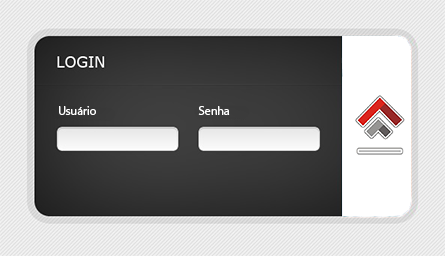
<style>
.page{position:relative;width:445px;height:256px}
.page>*{position:absolute;margin:0}
.t1{font:12px "MyriadPro-Regular";color:#ffffff}
</style>
<div class="page">
<p class="t1" style="left:59px;top:106px;width:37px;height:9px">Usuário</p>
<p class="t1" style="left:198px;top:106px;width:32px;height:9px">Senha</p>
</div>
